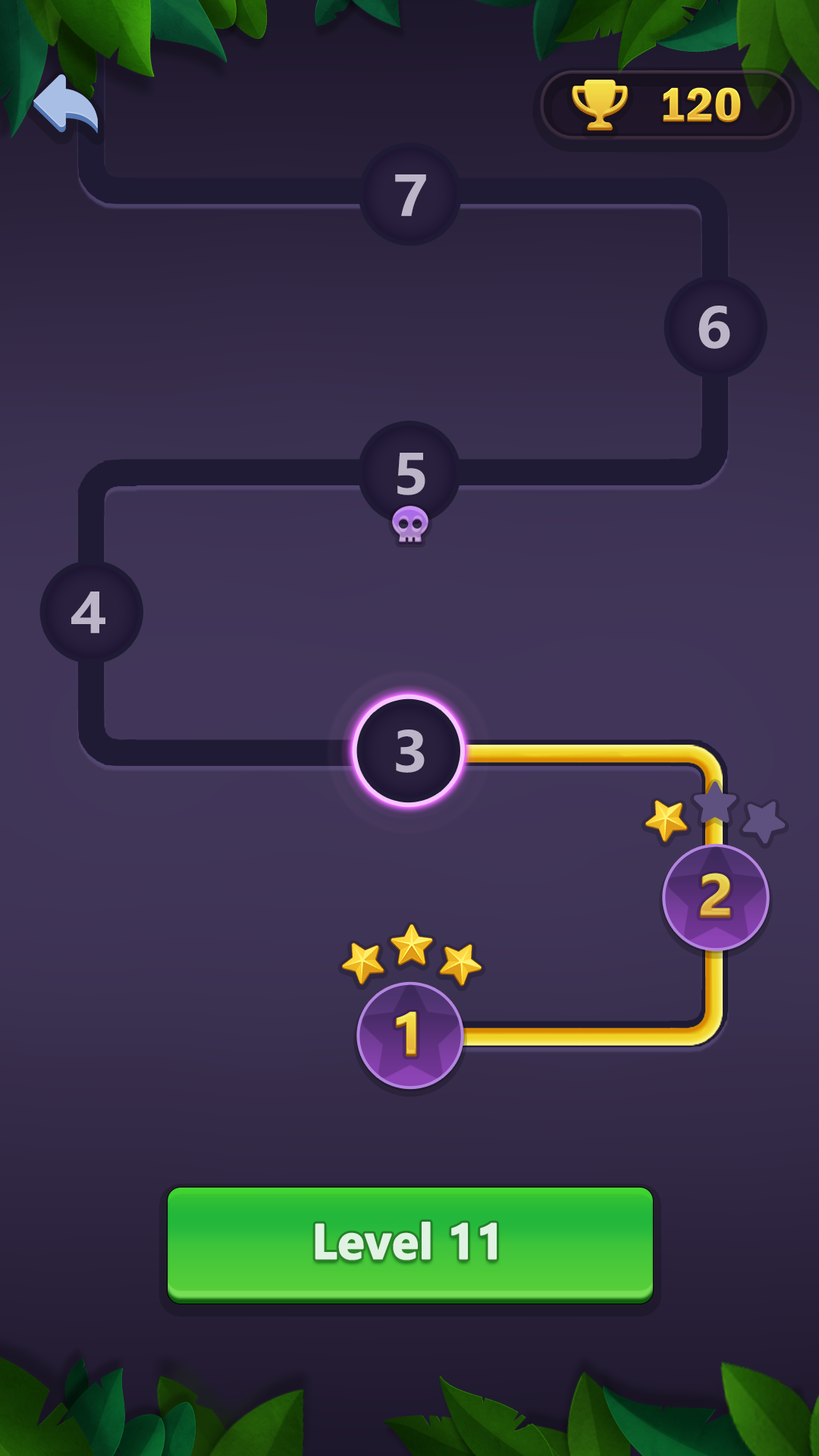
<style>
.page{position:relative;width:819px;height:1456px}
.page>*{position:absolute;margin:0}
.t1{font:54.6px "MicrosoftYaHei-Bold";letter-spacing:0.15em;color:#bcb5c8;scale:1.06 1}
.t2{font:54.6px "MicrosoftYaHei-Bold";letter-spacing:-0.075em;color:#eabd45;scale:1.06 1}
.t3{font:45.5px "MicrosoftYaHei-Bold";letter-spacing:-0.01em;color:#e0f3e3;font-weight:bold}
</style>
<div class="page">
<p class="t1" style="left:395px;top:174px;width:31px;height:42px">7</p>
<p class="t1" style="left:698px;top:306px;width:32px;height:43px">6</p>
<p class="t1" style="left:397px;top:453px;width:28px;height:42px">5</p>
<p class="t1" style="left:71px;top:591px;width:34px;height:42px">4</p>
<p class="t1" style="left:396px;top:730px;width:29px;height:43px">3</p>
<p class="t2" style="left:700px;top:873px;width:30px;height:43px;opacity:0.9">2</p>
<p class="t2" style="left:396px;top:1012px;width:20px;height:43px">1</p>
<p class="t3" style="left:315px;top:1222px;width:182px;height:38px">Level 11</p>
</div>
